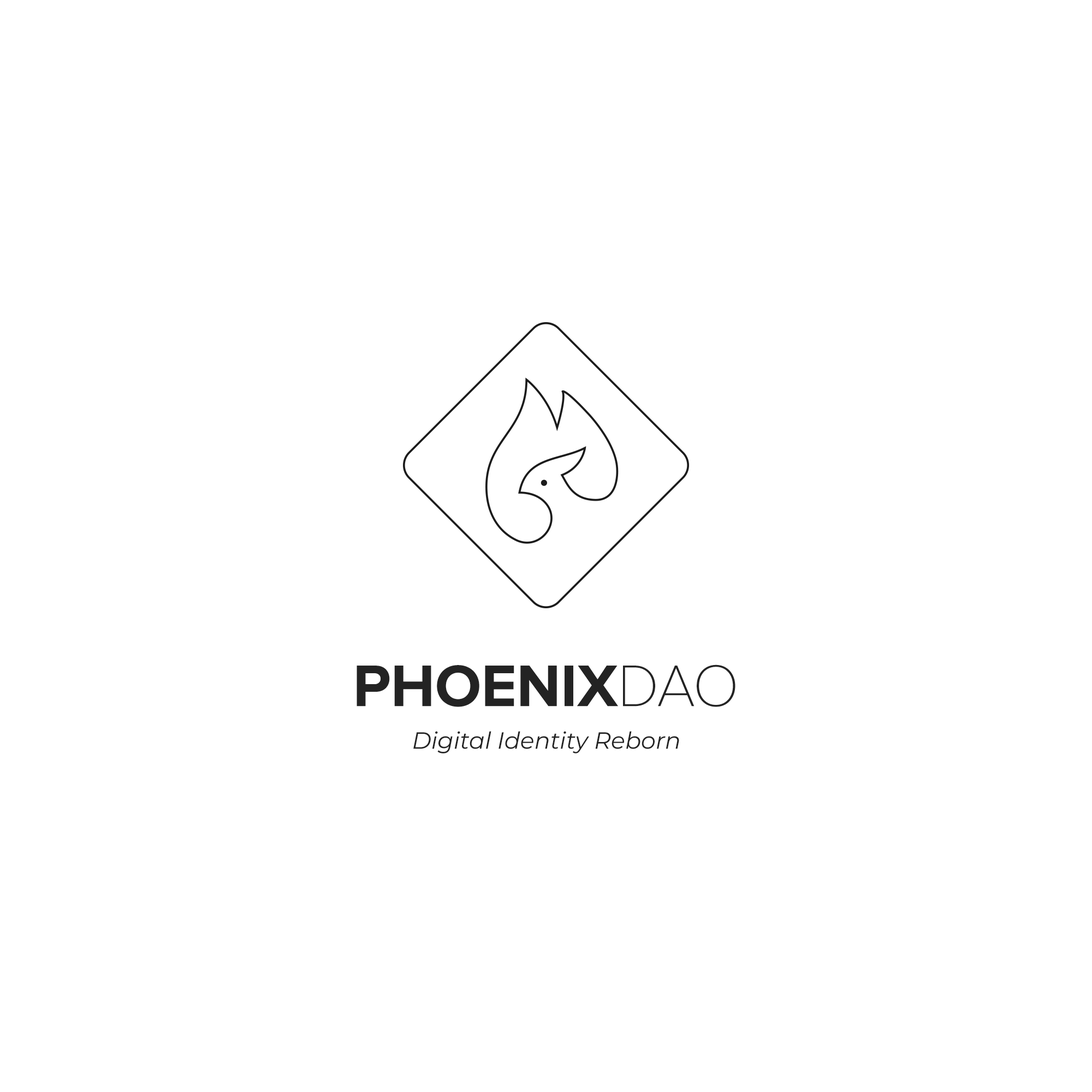
<style>
.page{position:relative;width:1092px;height:1092px;background:#ffffff}
.page>*{position:absolute;margin:0}
.t1{font:60.5px "ProximaNova-Bold";color:#232323}
.t2{font:60.5px "ProximaNovaA-Thin";color:#232323}
.t3{font:23.4px "Montserrat-Italic";color:#232323}
</style>
<div class="page">
<p class="t1" style="left:357px;top:664px;width:378px;height:43px">PHOENIX<span class="t2">DAO</span></p>
<p class="t3" style="left:413px;top:731px;width:266px;height:22px">Digital Identity Reborn</p>
</div>
